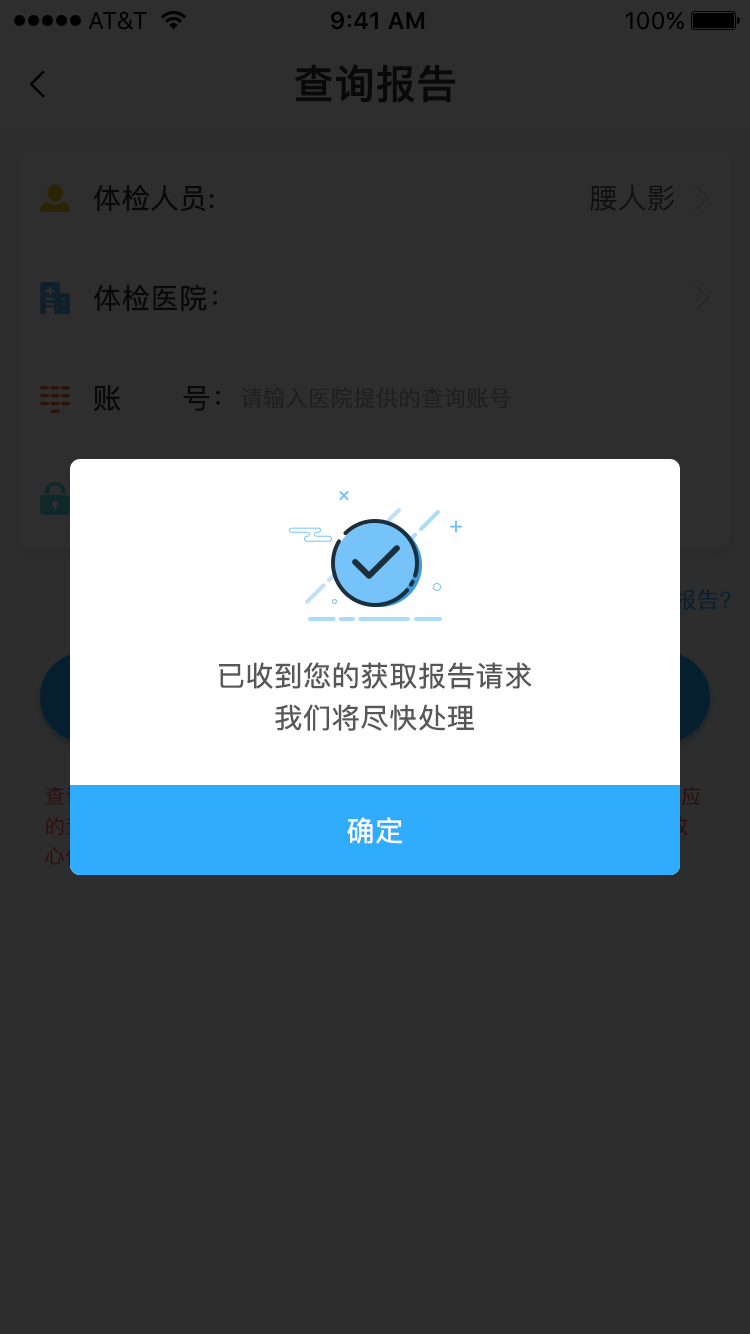
<style>
.page{position:relative;width:750px;height:1334px;background:#2d2d2d}
.page>*{position:absolute;margin:0}
.t1{font:40px "PingFangSC-Medium";color:#090909;font-weight:bold}
.t2{font:28px "PingFangSC-Regular";color:#090909;font-weight:bold}
.t3{font:28px "PingFangSC-Light";color:#101010;font-weight:bold}
.t4{font:22px "PingFangSC-Light";color:#1f1f1f;font-weight:bold}
.t5{font:28px/42px "PingFangSC-Regular";color:#575757;font-weight:bold}
.t6{font:28px "PingFangSC-Regular";color:#ffffff;font-weight:bold}
</style>
<div class="page">
<p class="t1" style="left:295px;top:64px;width:161px;height:39px">查询报告</p>
<p class="t2" style="left:93px;top:184px;width:121px;height:28px">体检人员:</p>
<p class="t3" style="left:590px;top:184px;width:85px;height:27px">腰人影</p>
<p class="t2" style="left:93px;top:284px;width:124px;height:27px">体检医院：</p>
<p class="t2" style="left:94px;top:385px;width:126px;height:27px">账      号：</p>
<p class="t4" style="left:241px;top:387px;width:269px;height:22px">请输入医院提供的查询账号</p>
<p class="t5" style="left:219px;top:662px;width:313px;height:69px;text-align:center">已收到您的获取报告请求<br>我们将尽快处理</p>
<p class="t6" style="left:347px;top:817px;width:56px;height:27px">确定</p>
</div>
